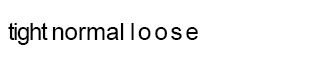
<style>
.page{position:relative;width:320px;height:64px;background:#ffffff}
.page>*{position:absolute;margin:0}
.t1{font:24px "ArialMT";color:#000000}
.t2{font:24px "ArialMT";letter-spacing:-0.06em;color:#000000}
.t3{font:24px "ArialMT";letter-spacing:0.12em;color:#000000}
</style>
<div class="page">
<p class="t1" style="left:8px;top:22px;width:190px;height:23px"><span class="t2">tight </span>normal <span class="t3">loose</span></p>
</div>
